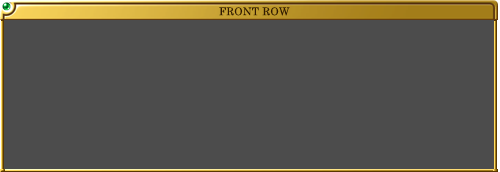
<style>
.page{position:relative;width:500px;height:172px;background:#4c4c4c}
.page>*{position:absolute;margin:0}
.t1{font:10.7px "CenturySchoolbook";letter-spacing:0.025em;color:#321a02}
</style>
<div class="page">
<p class="t1" style="left:219px;top:7px;width:71px;height:9px">FRONT ROW</p>
</div>
